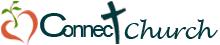
<style>
.page{position:relative;width:220px;height:45px;background:#ffffff}
.page>*{position:absolute;margin:0}
.t1{font:21.8px "ArialMT";letter-spacing:-0.1em;color:#02393e}
.t2{font:32.6px "ArialMT";letter-spacing:-0.15em;color:#02393e;scale:1.3 1}
.t3{font:21.8px "ArialMT";letter-spacing:-0.09em;color:#02393e}
.t4{font:21.8px "LucidaHandwriting-Italic";color:#02393e}
</style>
<div class="page">
<p class="t1" style="left:40px;top:13px;width:74px;height:24px"><span class="t2">C</span><span class="t3">on</span>nec</p>
<p class="t4" style="left:124px;top:19px;width:94px;height:20px">Church</p>
</div>
